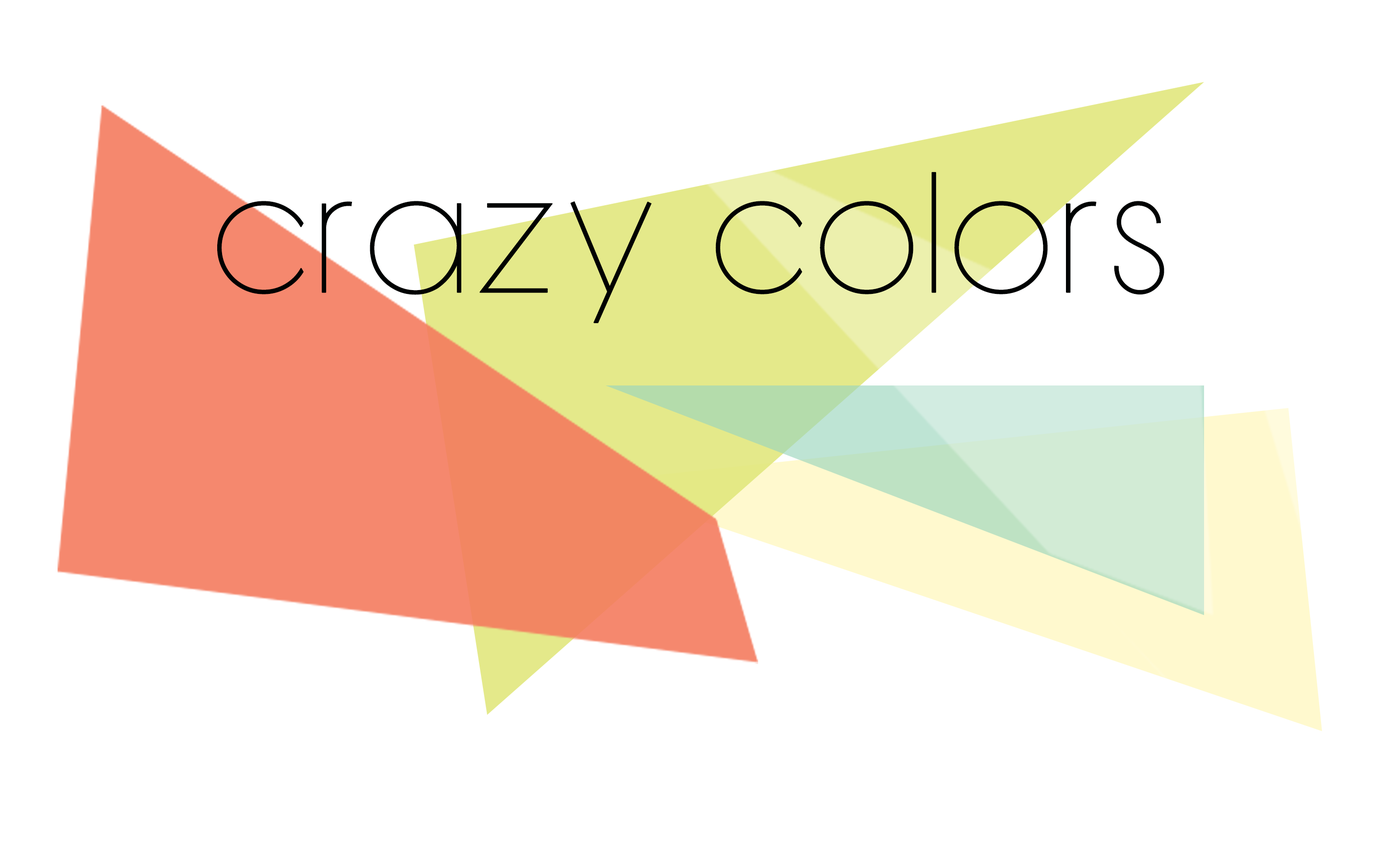
<style>
.page{position:relative;width:1381px;height:863px;background:#ffffff}
.page>*{position:absolute;margin:0}
.t1{font:119.9px "BondoluoPeek";letter-spacing:0.06em;color:#000202;font-weight:bold}
</style>
<div class="page">
<p class="t1" style="left:217px;top:172px;width:947px;height:151px">crazy colors</p>
</div>
